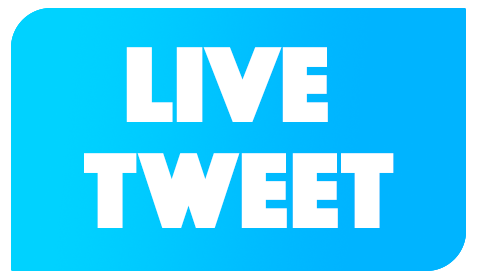
<style>
.page{position:relative;width:477px;height:279px;background:#ffffff}
.page>*{position:absolute;margin:0}
.t1{font:112.3px "Phosphate-Solid";color:#ffffff}
</style>
<div class="page">
<p class="t1" style="left:126px;top:47px;width:202px;height:75px">LIVE</p>
<p class="t1" style="left:84px;top:153px;width:310px;height:75px">TWEET</p>
</div>
